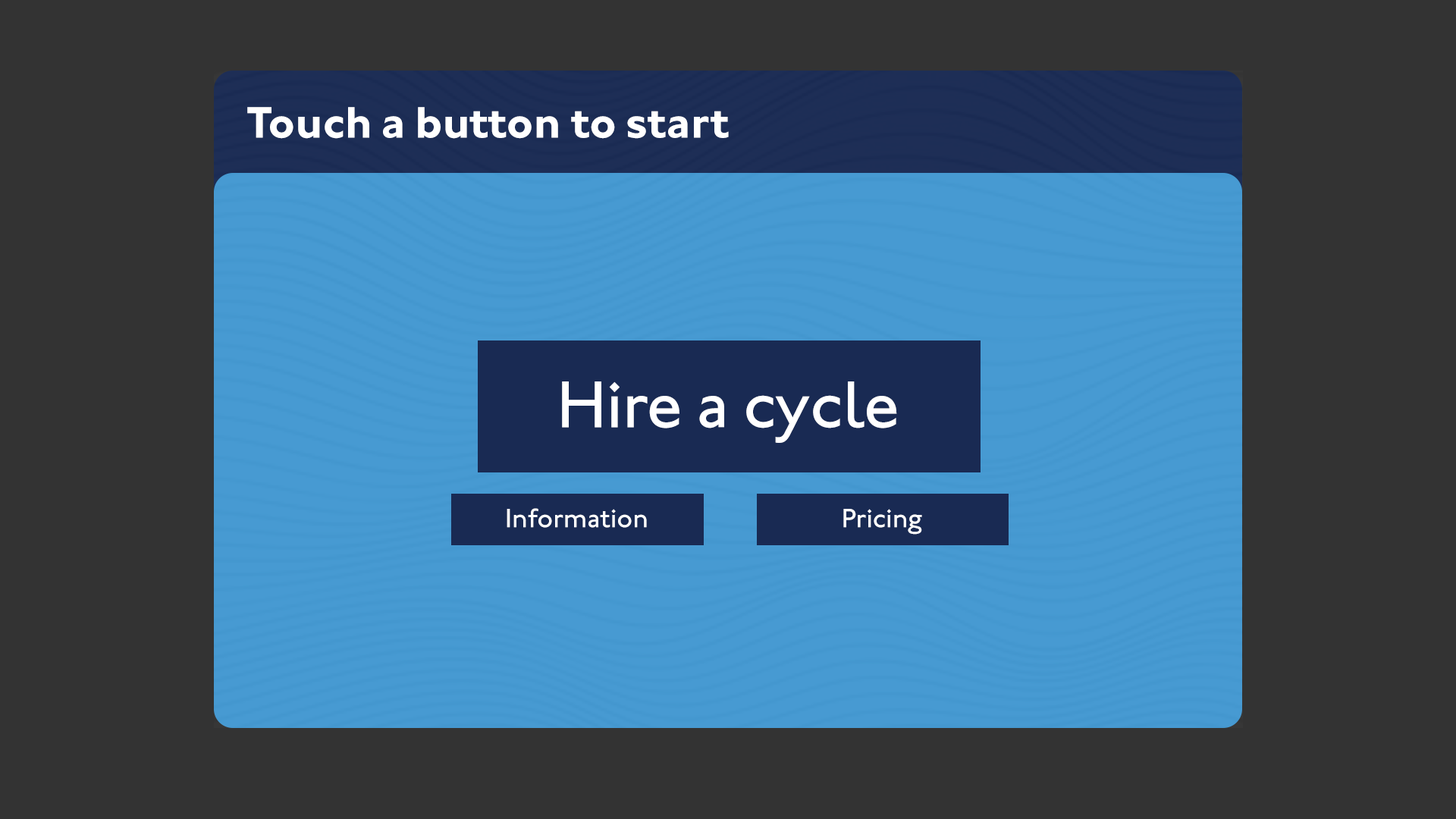
<style>
.page{position:relative;width:1456px;height:819px;background:#333333}
.page>*{position:absolute;margin:0}
.t1{font:45.5px "JohnstonITCStd-Bold";color:#ffffff}
.t2{font:68.2px "JohnstonITCStd-Medium";color:#ffffff}
.t3{font:27.3px "JohnstonITCStd-Medium";color:#ffffff}
</style>
<div class="page">
<p class="t1" style="left:247px;top:107px;width:482px;height:32px">Touch a button to start</p>
<p class="t2" style="left:562px;top:381px;width:335px;height:62px">Hire a cycle</p>
<p class="t3" style="left:507px;top:508px;width:140px;height:20px">Information</p>
<p class="t3" style="left:843px;top:509px;width:79px;height:26px">Pricing</p>
</div>
